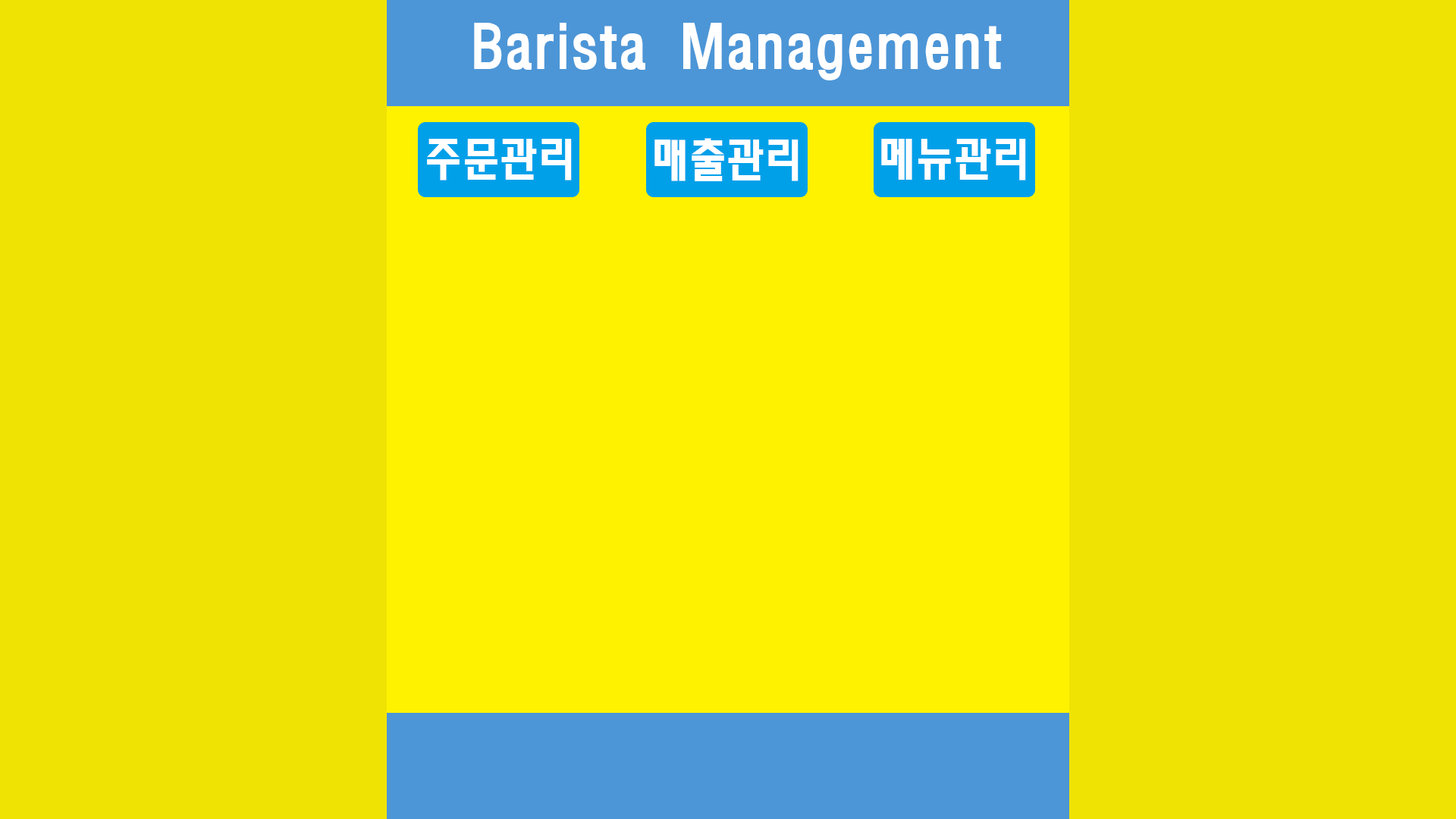
<style>
.page{position:relative;width:1456px;height:819px;background:#efe303}
.page>*{position:absolute;margin:0}
.t1{font:54.6px "MoeumTXB-HM";color:#ffffff}
.t2{font:46.3px "MoeumTXB-HM";color:#ffffff}
</style>
<div class="page">
<p class="t1" style="left:474px;top:23px;width:528px;height:57px">Barista Management</p>
<p class="t2" style="left:427px;top:139px;width:145px;height:41px">주문관리</p>
<p class="t2" style="left:654px;top:138px;width:145px;height:43px">매출관리</p>
<p class="t2" style="left:881px;top:139px;width:145px;height:41px">메뉴관리</p>
</div>
